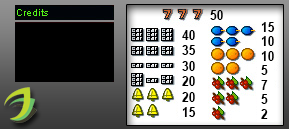
<style>
.page{position:relative;width:289px;height:129px}
.page>*{position:absolute;margin:0}
.t1{font:13.5px "Arial-BoldMT";color:#000000;scale:0.9 1}
.t2{font:12.9px "Arial-BoldMT";color:#000000;scale:0.94 1}
.t3{font:13.5px/14.5px "Arial-BoldMT";color:#000000;scale:0.9 1}
</style>
<div class="page">
<p class="t1" style="left:210px;top:10px;width:13px;height:10px">50</p>
<p class="t2" style="left:182px;top:30px;width:14px;height:87px">40<br>35<br>30<br>20<br>20<br>15</p>
<p class="t3" style="left:261px;top:22px;width:14px;height:97px">15<br>10<br>10<br>5<br>7<br>5<br>2</p>
</div>
